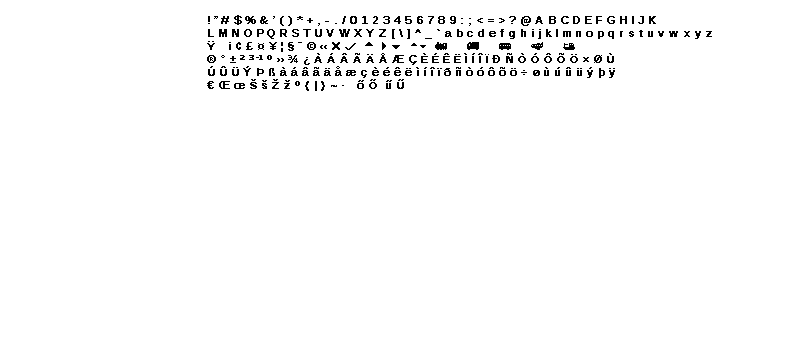
<style>
.page{position:relative;width:800px;height:340px;background:#ffffff}
.page>*{position:absolute;margin:0}
.t1{font:11px "LiberationSans";color:#000000;font-weight:bold}
</style>
<div class="page">
<p class="t1" style="left:207px;top:15px;width:505px;height:76px">! “ # $ % &amp; ‘ ( ) * + , - . / 0 1 2 3 4 5 6 7 8 9 : ; &lt; = &gt; ? @ A B C D E F G H I J K<br>L M N O P Q R S T U V W X Y Z [ \ ] ^ _ ` a b c d e f g h i j k l m n o p q r s t u v w x y z<br>Ÿ   i ¢ £ ¤ ¥ ¦ § ¨ © « <br>® ° ± ² ³ ¹ º » ¾ ¿ À Á Â Ã Ä Å Æ Ç È É Ê Ë Ì Í Î Ï Ð Ñ Ò Ó Ô Õ Ö × Ø Ù<br>Ú Û Ü Ý Þ ß à á â ã ä å æ ç è é ê ë ì í î ï ð ñ ò ó ô õ ö ÷ ø ù ú û ü ý þ ÿ<br>€ Œ œ Š š Ž ž º { | } ~ ·   ő Ő  ű Ű</p>
</div>
